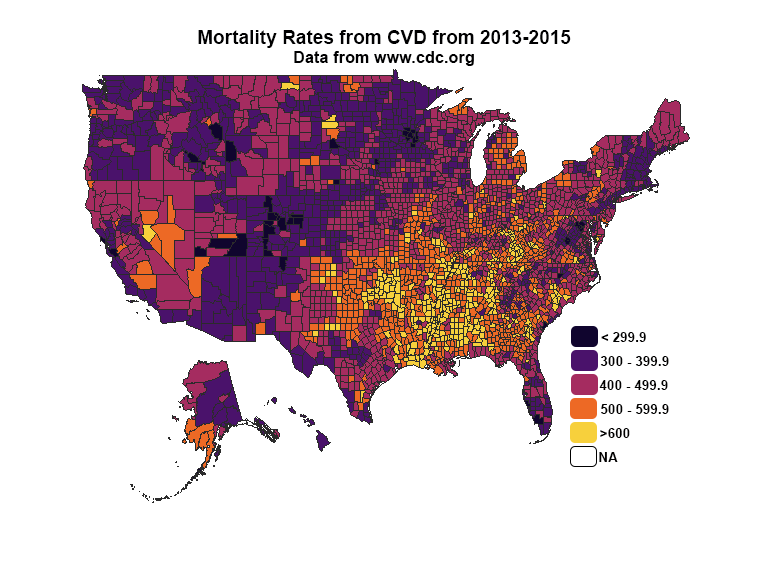
<style>
.page{position:relative;width:768px;height:576px;background:#ffffff}
.page>*{position:absolute;margin:0}
.t1{font:18.7px "Arial-BoldMT";letter-spacing:0.01em;color:#000001}
.t2{font:16px "Arial-BoldMT";letter-spacing:0.01em;color:#000001}
.t3{font:13.3px "Arial-BoldMT";letter-spacing:0.01em;color:#010000}
</style>
<div class="page">
<p class="t1" style="left:198px;top:30px;width:373px;height:36px;text-align:center">Mortality Rates from CVD from 2013-2015<br><span class="t2">Data from www.cdc.org</span></p>
<p class="t3" style="left:601px;top:332px;width:45px;height:10px">&lt; 299.9</p>
<p class="t3" style="left:600px;top:356px;width:69px;height:10px">300 - 399.9</p>
<p class="t3" style="left:599px;top:380px;width:69px;height:10px">400 - 499.9</p>
<p class="t3" style="left:601px;top:404px;width:68px;height:10px">500 - 599.9</p>
<p class="t3" style="left:600px;top:428px;width:30px;height:10px">&gt;600</p>
<p class="t3" style="left:599px;top:452px;width:19px;height:10px">NA</p>
</div>
